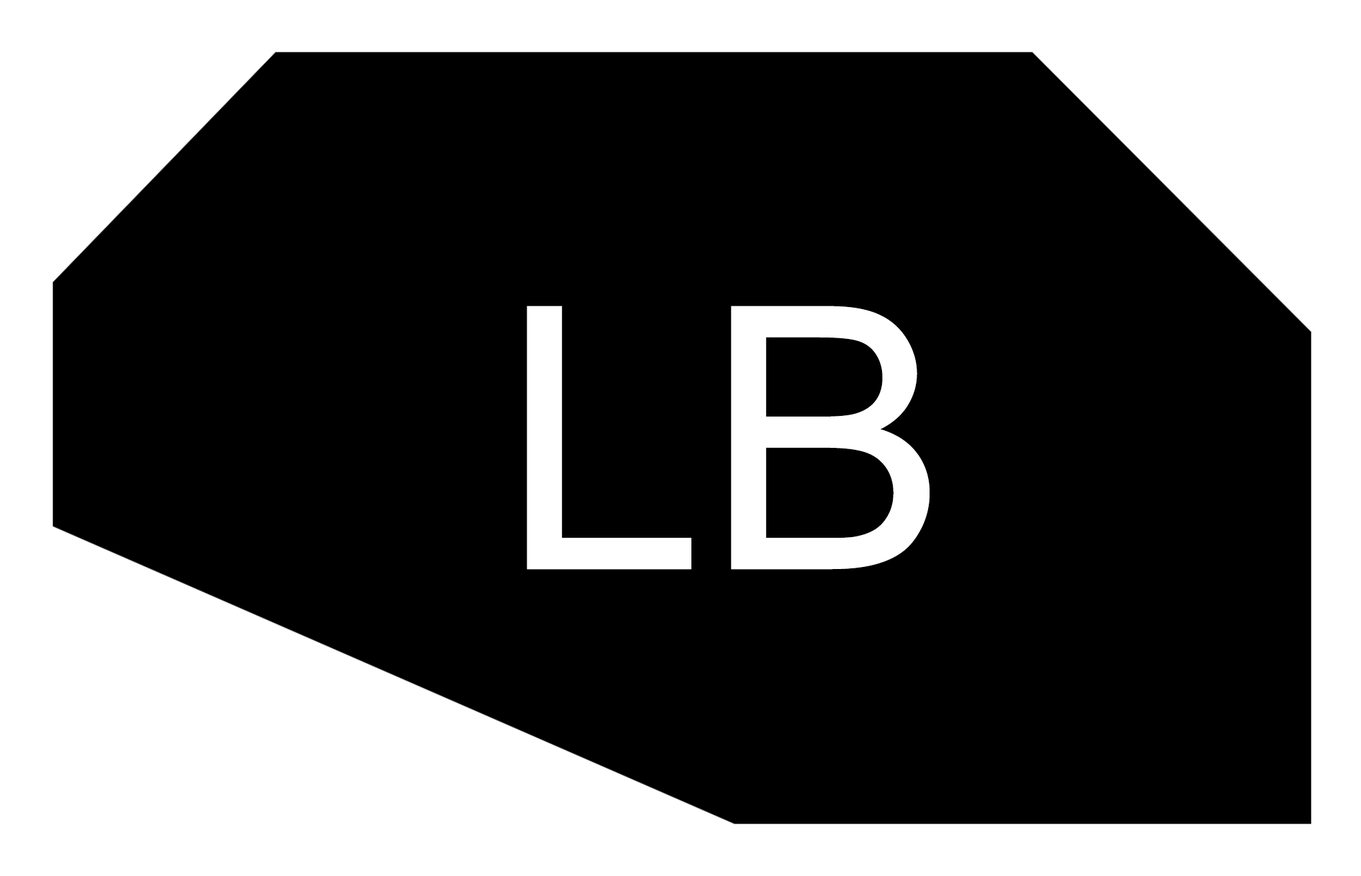
<style>
.page{position:relative;width:1361px;height:876px;background:#000000}
.page>*{position:absolute;margin:0}
.t1{font:367.1px "ArialMT";color:#ffffff}
</style>
<div class="page">
<p class="t1" style="left:527px;top:306px;width:403px;height:264px">LB</p>
</div>
